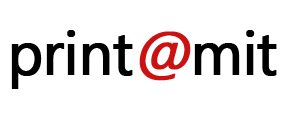
<style>
.page{position:relative;width:285px;height:120px;background:#ffffff}
.page>*{position:absolute;margin:0}
.t1{font:60px "Ebrima";letter-spacing:-0.025em;color:#000000;font-weight:bold}
.t2{font:60px "Ebrima";letter-spacing:-0.025em;color:#cb1212;font-weight:bold;font-style:italic}
</style>
<div class="page">
<p class="t1" style="left:11px;top:30px;width:266px;height:59px">print<span class="t2">@</span>mit</p>
</div>
